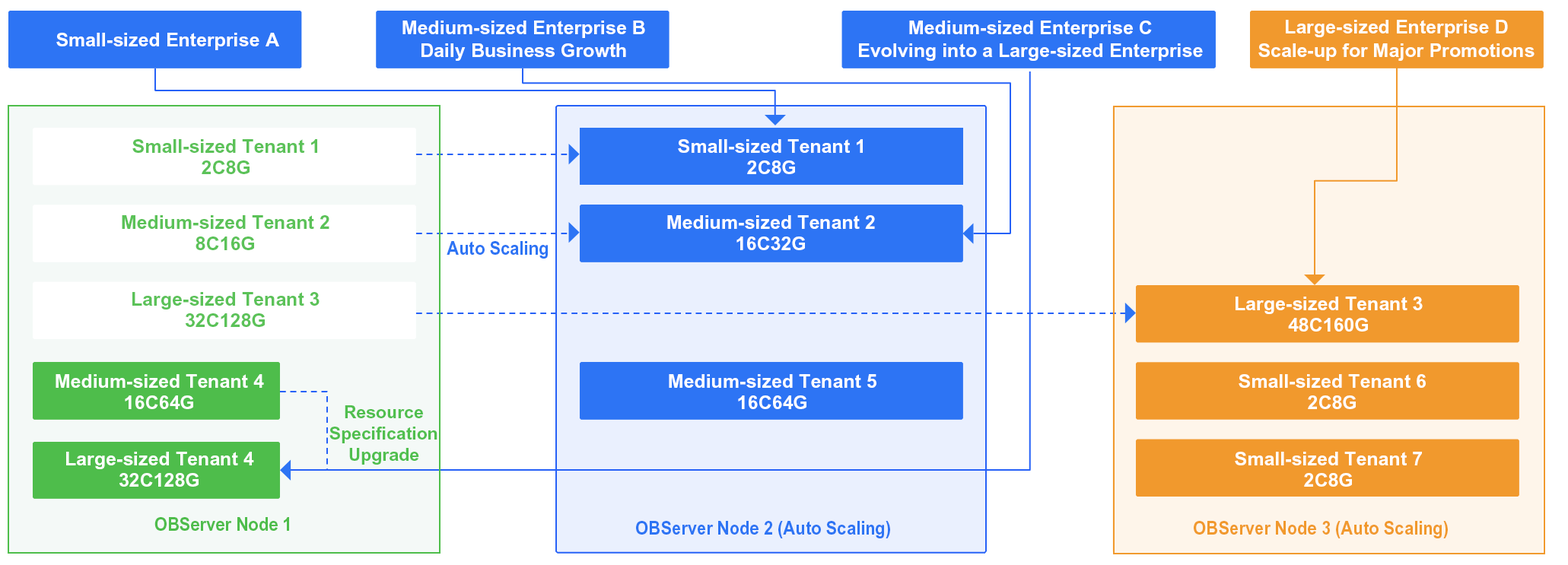
<style>
.page{position:relative;width:1568px;height:565px;background:#ffffff}
.page>*{position:absolute;margin:0}
.t1{font:19px/23.3px "Arial-BoldMT";color:#ffffff}
.t2{font:19px "Arial-BoldMT";color:#ffffff}
.t3{font:19px/21.3px "Arial-BoldMT";color:#5bc258}
.t4{font:19px/21.3px "Arial-BoldMT";color:#ffffff}
.t5{font:19px "Arial-BoldMT";color:#2d74f4;scale:0.88 1}
.t6{font:19px/21.3px "Arial-BoldMT";color:#fefffe}
.t7{font:17.5px/21.3px "Arial-BoldMT";color:#50bf4e}
.t8{font:19px "Arial-BoldMT";color:#4ebd4b;scale:0.88 1}
.t9{font:19px "Arial-BoldMT";color:#f1992d;scale:0.88 1}
</style>
<div class="page">
<p class="t1" style="left:402px;top:21px;width:243px;height:40px;text-align:center">Medium-sized Enterprise B<br>Daily Business Growth</p>
<p class="t1" style="left:859px;top:21px;width:344px;height:40px;text-align:center">Medium-sized Enterprise C<br>Evolving into a Large-sized Enterprise</p>
<p class="t1" style="left:1258px;top:20px;width:277px;height:41px;text-align:center">Large-sized Enterprise D<br>Scale-up for Major Promotions</p>
<p class="t2" style="left:56px;top:33px;width:223px;height:17px">Small-sized Enterprise A</p>
<p class="t3" style="left:132px;top:139px;width:185px;height:35px;text-align:center">Small-sized Tenant 1<br>2C8G</p>
<p class="t4" style="left:678px;top:139px;width:185px;height:35px;text-align:center">Small-sized Tenant 1<br>2C8G</p>
<p class="t3" style="left:122px;top:215px;width:207px;height:35px;text-align:center">Medium-sized Tenant 2<br>8C16G</p>
<p class="t4" style="left:667px;top:215px;width:208px;height:35px;text-align:center">Medium-sized Tenant 2<br>16C32G</p>
<p class="t5" style="left:447px;top:241px;width:101px;height:18px">Auto Scaling</p>
<p class="t3" style="left:132px;top:292px;width:188px;height:35px;text-align:center">Large-sized Tenant 3<br>32C128G</p>
<p class="t4" style="left:1236px;top:297px;width:187px;height:35px;text-align:center">Large-sized Tenant 3<br>48C160G</p>
<p class="t6" style="left:56px;top:374px;width:208px;height:35px;text-align:center">Medium-sized Tenant 4<br>16C64G</p>
<p class="t4" style="left:669px;top:374px;width:207px;height:35px;text-align:center">Medium-sized Tenant 5<br>16C64G</p>
<p class="t4" style="left:1239px;top:374px;width:187px;height:35px;text-align:center">Small-sized Tenant 6<br>2C8G</p>
<p class="t7" style="left:329px;top:406px;width:108px;height:59px;text-align:center">Resource<br>Specification<br>Upgrade</p>
<p class="t4" style="left:66px;top:452px;width:188px;height:35px;text-align:center">Large-sized Tenant 4<br>32C128G</p>
<p class="t4" style="left:1235px;top:452px;width:187px;height:35px;text-align:center">Small-sized Tenant 7<br>2C8G</p>
<p class="t8" style="left:154px;top:517px;width:135px;height:14px">OBServer Node 1</p>
<p class="t5" style="left:636px;top:521px;width:254px;height:18px">OBServer Node 2 (Auto Scaling)</p>
<p class="t9" style="left:1194px;top:521px;width:254px;height:18px">OBServer Node 3 (Auto Scaling)</p>
</div>
